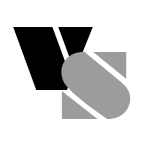
<style>
.page{position:relative;width:144px;height:144px;background:#ffffff}
.page>*{position:absolute;margin:0}
.t1{font:82.3px "Braggadocio";color:#000000}
.t2{font:86.9px "Braggadocio";color:#9c9c9c}
</style>
<div class="page">
<p class="t1" style="left:13px;top:27px;width:80px;height:63px">V</p>
<p class="t2" style="left:61px;top:52px;width:70px;height:67px">S</p>
</div>
